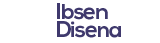
<style>
.page{position:relative;width:160px;height:43px;background:#ffffff}
.page>*{position:absolute;margin:0}
.t1{font:22.1px/18.7px "NexaBold";letter-spacing:-0.04em;color:#3f396d}
</style>
<div class="page">
<p class="t1" style="left:57px;top:3px;width:64px;height:35px">Ibsen<br>Disena</p>
</div>
